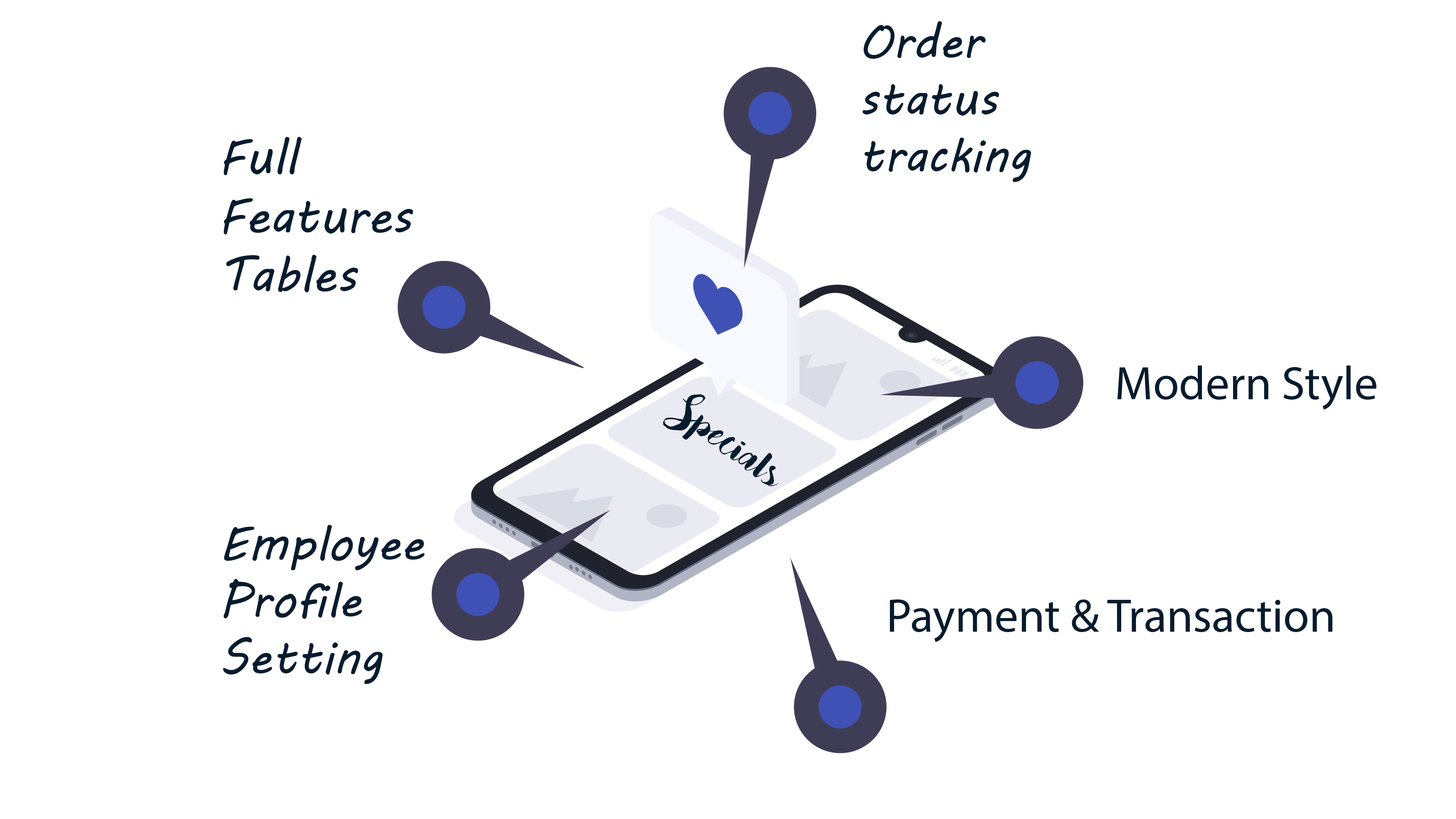
<style>
.page{position:relative;width:1456px;height:819px;background:#ffffff}
.page>*{position:absolute;margin:0}
.t1{font:47.4px "MVBoli";color:#051c2e}
.t2{font:49px "MVBoli";color:#051c2e}
.t3{font:47.4px "MyriadPro-Regular";color:#051c2e}
.t4{font:49.8px "Bakery";color:#051c2e}
</style>
<div class="page">
<p class="t1" style="left:862px;top:21px;width:169px;height:161px">Order<br>status<br>tracking</p>
<p class="t2" style="left:224px;top:137px;width:189px;height:155px">Full <br>Features <br>Tables</p>
<p class="t3" style="left:1117px;top:366px;width:259px;height:44px">Modern Style</p>
<p class="t4" style="left:663px;top:394px;width:116px;height:92px;rotate:37deg">Specials</p>
<p class="t1" style="left:223px;top:525px;width:202px;height:159px">Employee<br>Profile<br>Setting</p>
<p class="t3" style="left:890px;top:599px;width:442px;height:43px">Payment &amp; Transaction</p>
</div>
